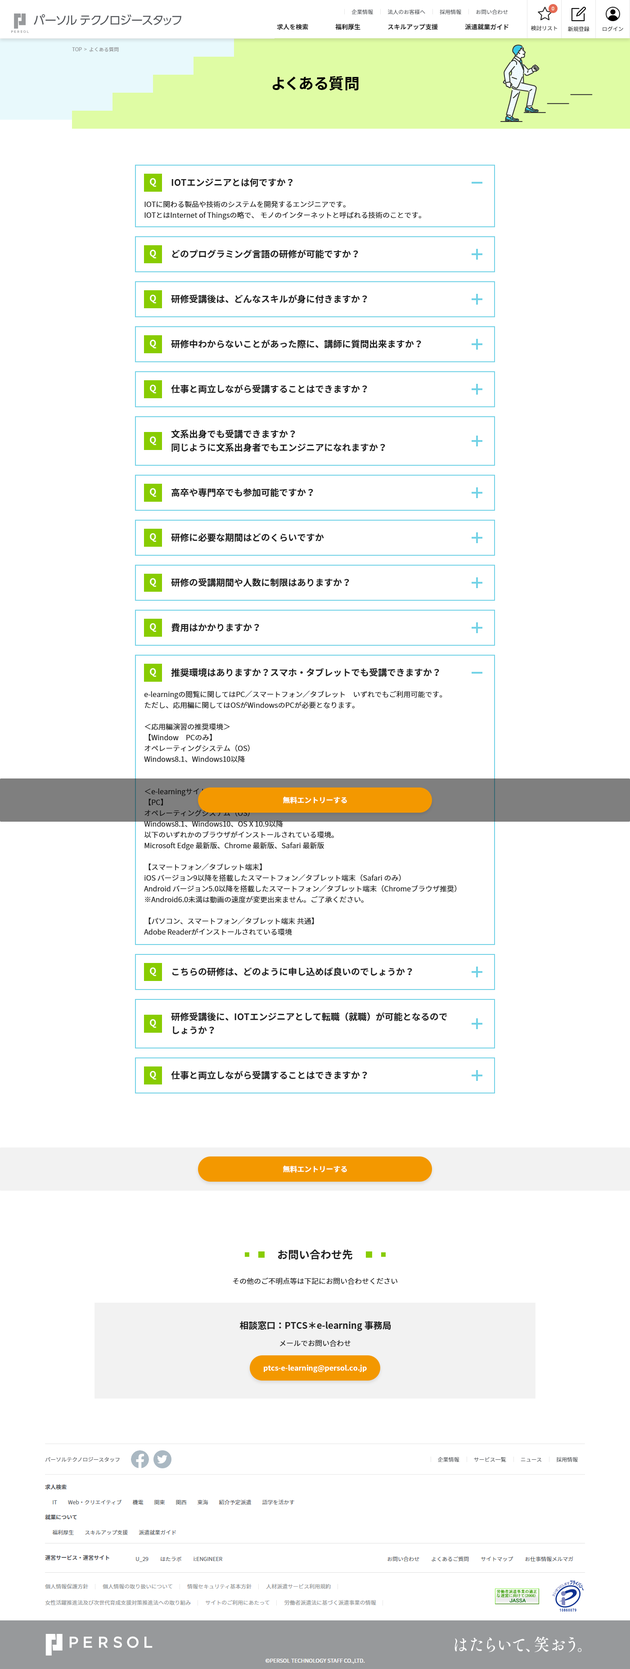
<style>
.page{position:relative;width:630px;height:1669px;background:#ffffff}
.page>*{position:absolute;margin:0}
.t1{font:5px "NotoSansJP-Regular";color:#97999b}
.t2{font:15.3px "NotoSansJP-Bold";letter-spacing:0.05em;color:#000000}
.t3{font:9px "NotoSansJP-Bold";color:#222222}
.t4{font:7.2px/10.8px "NotoSansJP-Regular";color:#222222}
.t5{font:9px/13.5px "NotoSansJP-Bold";color:#222222}
.t6{font:7.2px "NotoSansJP-Bold";color:#ffffff}
.t7{font:10.8px "NotoSansJP-Bold";color:#222222}
.t8{font:7.2px "NotoSansJP-Regular";color:#222222}
</style>
<div class="page">
<p class="t1" style="left:72px;top:47px;width:47px;height:5px">TOP  &gt;  よくある質問</p>
<p class="t2" style="left:272px;top:76px;width:87px;height:15px">よくある質問</p>
<p class="t3" style="left:171px;top:178px;width:122px;height:9px">IOTエンジニアとは何ですか？</p>
<p class="t4" style="left:144px;top:201px;width:277px;height:19px">IOTに関わる製品や技術のシステムを開発するエンジニアです。<br>IOTとはInternet of Thingsの略で、 モノのインターネットと呼ばれる技術のことです。</p>
<p class="t3" style="left:172px;top:249px;width:186px;height:9px">どのプログラミング言語の研修が可能ですか？</p>
<p class="t3" style="left:171px;top:294px;width:196px;height:9px">研修受講後は、どんなスキルが身に付きますか？</p>
<p class="t3" style="left:171px;top:339px;width:250px;height:9px">研修中わからないことがあった際に、講師に質問出来ますか？</p>
<p class="t3" style="left:171px;top:384px;width:196px;height:9px">仕事と両立しながら受講することはできますか？</p>
<p class="t5" style="left:171px;top:429px;width:214px;height:23px">文系出身でも受講できますか？<br>同じように文系出身者でもエンジニアになれますか？</p>
<p class="t3" style="left:171px;top:488px;width:142px;height:9px">高卒や専門卒でも参加可能ですか？</p>
<p class="t3" style="left:171px;top:533px;width:153px;height:9px">研修に必要な期間はどのくらいですか</p>
<p class="t3" style="left:171px;top:578px;width:178px;height:9px">研修の受講期間や人数に制限はありますか？</p>
<p class="t3" style="left:171px;top:623px;width:88px;height:9px">費用はかかりますか？</p>
<p class="t3" style="left:171px;top:668px;width:268px;height:9px">推奨環境はありますか？スマホ・タブレットでも受講できますか？</p>
<p class="t4" style="left:144px;top:691px;width:313px;height:245px">e-learningの閲覧に関してはPC／スマートフォン／タブレット　いずれでもご利用可能です。<br>ただし、応用編に関してはOSがWindowsのPCが必要となります。<br><br>＜応用編演習の推奨環境＞<br>【Window　PCのみ】<br>オペレーティングシステム（OS）<br>Windows8.1、Windows10以降<br><br><br>＜e-learningサイト閲覧の推奨環境＞<br>【PC】<br>オペレーティングシステム（OS）<br>Windows8.1、Windows10、OS X 10.9以降<br>以下のいずれかのブラウザがインストールされている環境。<br>Microsoft Edge 最新版、Chrome 最新版、Safari 最新版<br><br>【スマートフォン／タブレット端末】<br>iOS バージョン9以降を搭載したスマートフォン／タブレット端末（Safari のみ）<br>Android バージョン5.0以降を搭載したスマートフォン／タブレット端末（Chromeブラウザ推奨）<br>※Android6.0未満は動画の速度が変更出来ません。ご了承ください。<br><br>【パソコン、スマートフォン／タブレット端末 共通】<br>Adobe Readerがインストールされている環境</p>
<p class="t6" style="left:283px;top:796px;width:64px;height:8px">無料エントリーする</p>
<p class="t3" style="left:172px;top:968px;width:240px;height:8px">こちらの研修は、どのように申し込めば良いのでしょうか？</p>
<p class="t5" style="left:171px;top:1012px;width:276px;height:23px">研修受講後に、IOTエンジニアとして転職（就職）が可能となるのでしょうか？</p>
<p class="t3" style="left:171px;top:1071px;width:196px;height:9px">仕事と両立しながら受講することはできますか？</p>
<p class="t6" style="left:283px;top:1166px;width:64px;height:7px">無料エントリーする</p>
<p class="t7" style="left:278px;top:1249px;width:74px;height:11px">お問い合わせ先</p>
<p class="t8" style="left:233px;top:1278px;width:164px;height:7px">その他のご不明点等は下記にお問い合わせください</p>
<p class="t3" style="left:239px;top:1321px;width:152px;height:10px">相談窓口：PTCS＊e-learning事務局</p>
<p class="t8" style="left:279px;top:1340px;width:72px;height:7px">メールでお問い合わせ</p>
<p class="t6" style="left:264px;top:1365px;width:103px;height:7px">ptcs-e-learning@persol.co.jp</p>
</div>
